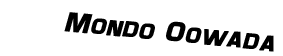
<style>
.page{position:relative;width:283px;height:56px;background:#ffffff}
.page>*{position:absolute;margin:0}
.t1{font:28px "Maximus";color:#000000;font-weight:bold;font-style:italic}
</style>
<div class="page">
<p class="t1" style="left:64px;top:12px;width:210px;height:40px;rotate:6deg">Mondo Oowada</p>
</div>
